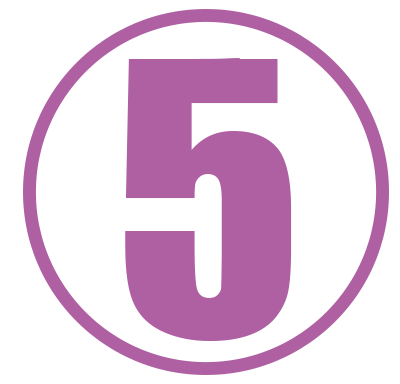
<style>
.page{position:relative;width:400px;height:384px;background:#ffffff}
.page>*{position:absolute;margin:0}
.t1{font:351.3px "Impact";color:#af60a2}
</style>
<div class="page">
<p class="t1" style="left:125px;top:59px;width:167px;height:282px">5</p>
</div>
